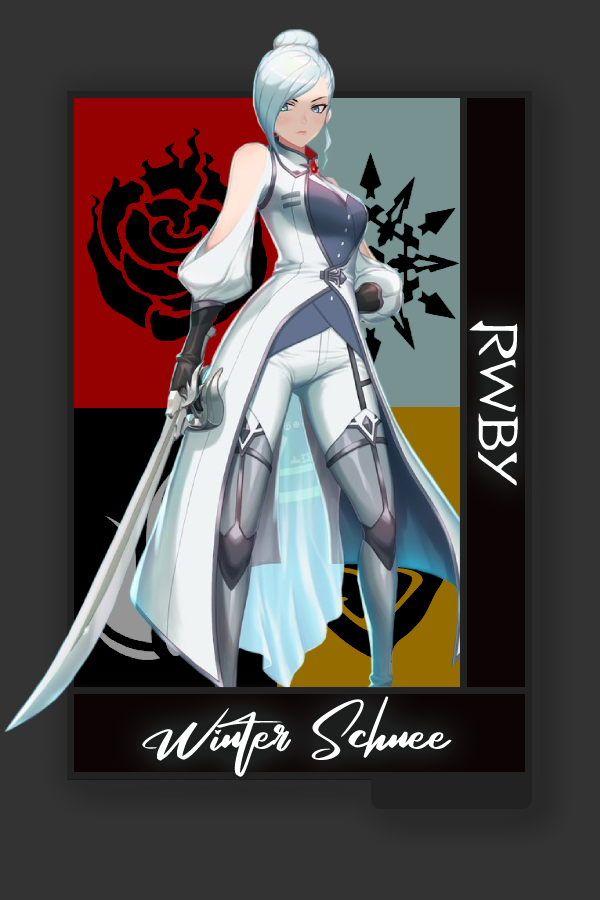
<style>
.page{position:relative;width:600px;height:900px;background:#333333}
.page>*{position:absolute;margin:0}
.t1{font:61.3px "RWBY_Style";color:#ffffff;scale:1.25 1}
.t2{font:76.6px "RosegaFREE";color:#ffffff;scale:0.91 1}
</style>
<div class="page">
<p class="t1" style="left:469px;top:320px;width:49px;height:166px;rotate:90deg">RWBY</p>
<p class="t2" style="left:141px;top:684px;width:311px;height:94px">Winter Schnee</p>
</div>
